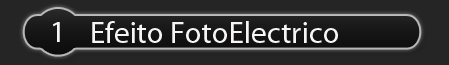
<style>
.page{position:relative;width:449px;height:65px;background:#252525}
.page>*{position:absolute;margin:0}
.t1{font:31px "MyriadPro-Regular";color:#f7f5f5}
</style>
<div class="page">
<p class="t1" style="left:53px;top:22px;width:7px;height:20px">1</p>
<p class="t1" style="left:92px;top:21px;width:246px;height:22px">Efeito FotoElectrico</p>
</div>
